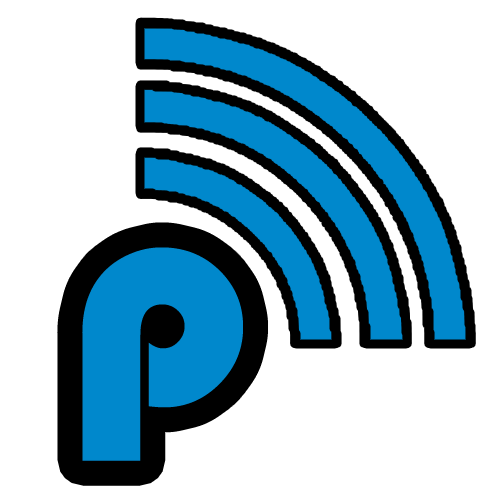
<style>
.page{position:relative;width:500px;height:500px;background:#ffffff}
.page>*{position:absolute;margin:0}
.t1{font:314.9px "Bauhaus93";color:#0088cc}
</style>
<div class="page">
<p class="t1" style="left:82px;top:247px;width:161px;height:214px">p</p>
</div>
